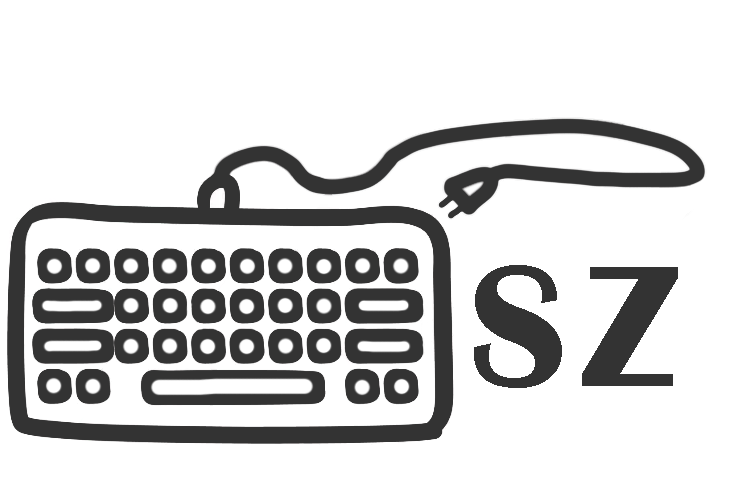
<style>
.page{position:relative;width:747px;height:484px;background:#ffffff}
.page>*{position:absolute;margin:0}
.t1{font:179px "BritannicBold";letter-spacing:0.08em;color:#333333}
</style>
<div class="page">
<p class="t1" style="left:474px;top:265px;width:204px;height:123px">SZ</p>
</div>
